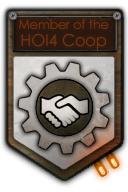
<style>
.page{position:relative;width:128px;height:192px}
.page>*{position:absolute;margin:0}
.t1{font:12.8px/16.4px "CenturyGothic";color:#7e3412;scale:0.97 1}
.t2{font:16.4px/16.4px "CenturyGothic";color:#7e3412;scale:0.97 1}
</style>
<div class="page">
<p class="t1" style="left:19px;top:19px;width:90px;height:31px;text-align:center">Member of the<br><span class="t2">HOI4 Coop</span></p>
</div>
